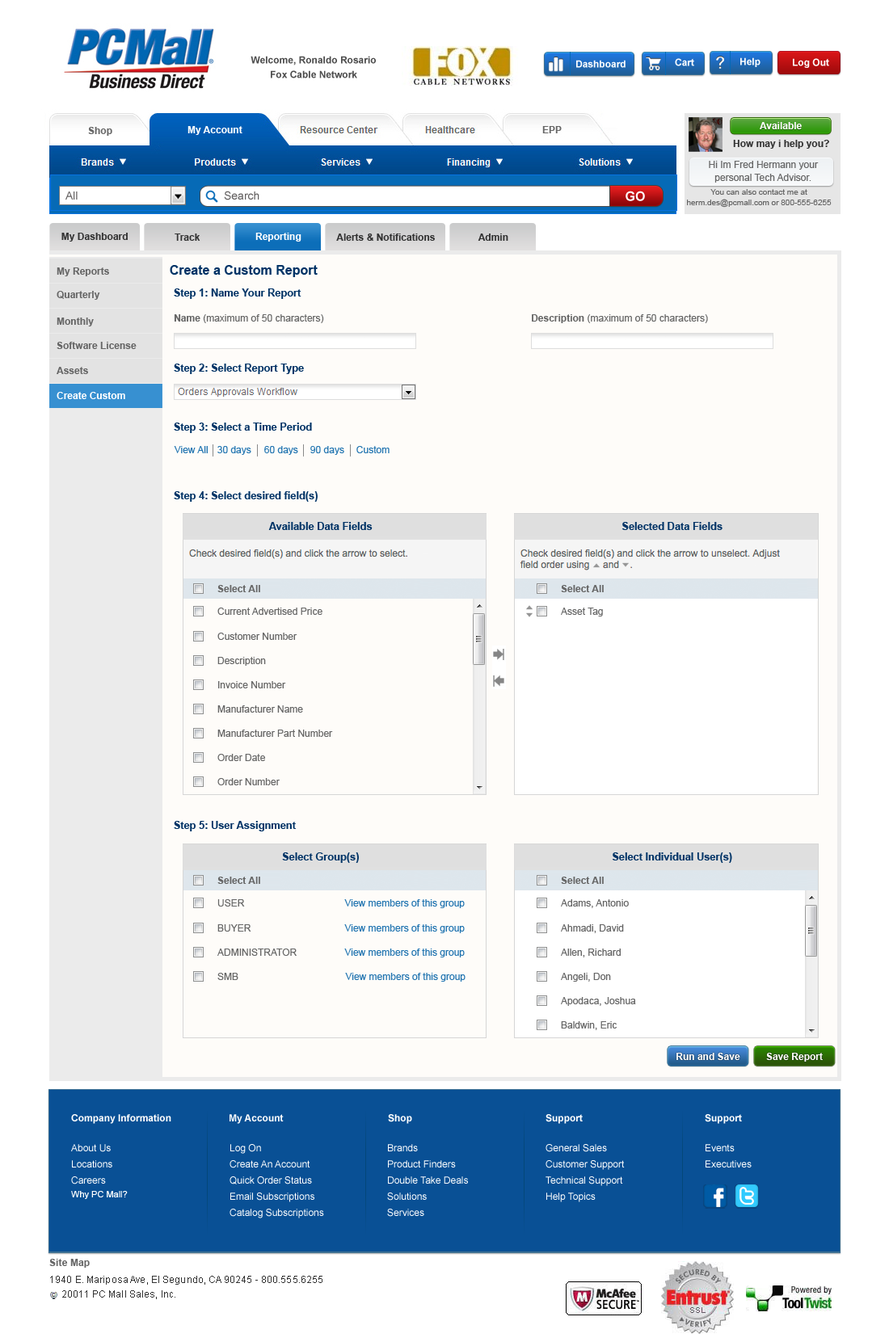
<style>
.page{position:relative;width:889px;height:1342px;background:#ffffff}
.page>*{position:absolute;margin:0}
.t1{font:9.7px/14.5px "Arial-BoldMT";color:#4e4e4e}
.t2{font:9.7px "Arial-BoldMT";color:#feffff}
.t3{font:9.7px "Arial-BoldMT";color:#fffefe}
.t4{font:9.7px "Arial-BoldMT";color:#333333}
.t5{font:9.7px/12.9px "ArialMT";color:#666666}
.t6{font:11.3px "ArialMT";color:#625f5f}
.t7{font:12.9px "Arial-BoldMT";color:#ffffff}
.t8{font:8.1px/10.5px "ArialMT";color:#666666}
.t9{font:9.7px "Arial-BoldMT";color:#ffffff}
.t10{font:12.9px "Arial-BoldMT";color:#003366}
.t11{font:10.4px "Arial-BoldMT";color:#003366}
.t12{font:9.7px "ArialMT";color:#666666}
.t13{font:9.7px "Arial-BoldMT";color:#666666}
.t14{font:9.7px "ArialMT";color:#2275b1}
.t15{font:9.7px/16.2px "ArialMT";color:#ffffff}
.t16{font:8.9px "ArialMT";color:#ffffff}
.t17{font:9.7px "Arial-BoldMT";letter-spacing:0.01em;color:#666666}
.t18{font:9.7px "ArialMT";letter-spacing:0.01em;color:#333333}
</style>
<div class="page">
<p class="t1" style="left:250px;top:56px;width:126px;height:22px;text-align:center">Welcome, Ronaldo Rosario <br>Fox Cable Network</p>
<p class="t2" style="left:576px;top:60px;width:49px;height:8px">Dashboard</p>
<p class="t2" style="left:675px;top:58px;width:19px;height:8px">Cart</p>
<p class="t2" style="left:740px;top:57px;width:20px;height:10px">Help</p>
<p class="t2" style="left:793px;top:58px;width:36px;height:10px">Log Out</p>
<p class="t3" style="left:759px;top:122px;width:42px;height:7px">Available</p>
<p class="t4" style="left:733px;top:140px;width:96px;height:9px">How may i help you?</p>
<p class="t5" style="left:708px;top:161px;width:110px;height:22px;text-align:center">Hi Im Fred Hermann your personal Tech Advisor.</p>
<p class="t6" style="left:65px;top:191px;width:13px;height:9px">All</p>
<p class="t6" style="left:224px;top:191px;width:35px;height:9px">Search</p>
<p class="t7" style="left:625px;top:191px;width:20px;height:10px">GOv</p>
<p class="t8" style="left:687px;top:189px;width:144px;height:19px;text-align:center">You can also contact me at herm.des@pcmall.com or 800-555-6255</p>
<p class="t4" style="left:61px;top:233px;width:67px;height:9px">My Dashboard</p>
<p class="t4" style="left:174px;top:233px;width:26px;height:8px">Track</p>
<p class="t9" style="left:255px;top:233px;width:46px;height:9px">Reporting</p>
<p class="t4" style="left:336px;top:233px;width:99px;height:8px">Alerts &amp; Notifications</p>
<p class="t4" style="left:477px;top:233px;width:31px;height:8px">Admin</p>
<p class="t10" style="left:170px;top:265px;width:147px;height:12px">Create a Custom Report</p>
<p class="t11" style="left:174px;top:288px;width:127px;height:11px">Step 1: Name Your Report</p>
<p class="t12" style="left:174px;top:314px;width:150px;height:9px"><span class="t13">Name</span> (maximum of 50 characters)</p>
<p class="t12" style="left:532px;top:314px;width:176px;height:9px"><span class="t13">Description </span>(maximum of 50 characters)</p>
<p class="t11" style="left:174px;top:364px;width:130px;height:10px">Step 2: Select Report Type</p>
<p class="t11" style="left:174px;top:423px;width:138px;height:10px">Step 3: Select a Time Period</p>
<p class="t14" style="left:174px;top:446px;width:34px;height:7px">View All</p>
<p class="t14" style="left:217px;top:446px;width:34px;height:9px">30 days</p>
<p class="t14" style="left:264px;top:446px;width:34px;height:9px">60 days</p>
<p class="t14" style="left:310px;top:446px;width:34px;height:9px">90 days</p>
<p class="t14" style="left:356px;top:446px;width:33px;height:7px">Custom</p>
<p class="t11" style="left:174px;top:491px;width:143px;height:11px">Step 4: Select desired field(s)</p>
<p class="t11" style="left:174px;top:821px;width:122px;height:10px">Step 5: User Assignment</p>
<p class="t9" style="left:676px;top:1053px;width:64px;height:7px">Run and Save</p>
<p class="t9" style="left:766px;top:1053px;width:56px;height:9px">Save Report</p>
<p class="t9" style="left:71px;top:1114px;width:100px;height:10px">Company Information</p>
<p class="t9" style="left:229px;top:1114px;width:55px;height:10px">My Account</p>
<p class="t9" style="left:388px;top:1114px;width:24px;height:10px">Shop</p>
<p class="t9" style="left:545px;top:1114px;width:37px;height:10px">Support</p>
<p class="t9" style="left:704px;top:1114px;width:38px;height:10px">Support</p>
<p class="t15" style="left:71px;top:1144px;width:41px;height:40px">About Us<br>Locations<br>Careers</p>
<p class="t15" style="left:229px;top:1144px;width:95px;height:74px">Log On<br>Create An Account<br>Quick Order Status<br>Email Subscriptions<br>Catalog Subscriptions</p>
<p class="t15" style="left:387px;top:1144px;width:81px;height:73px">Brands<br>Product Finders<br>Double Take Deals<br>Solutions<br>Services</p>
<p class="t15" style="left:545px;top:1144px;width:79px;height:58px">General Sales<br>Customer Support<br>Technical Support<br>Help Topics</p>
<p class="t15" style="left:705px;top:1144px;width:46px;height:23px">Events<br>Executives</p>
<p class="t16" style="left:71px;top:1191px;width:57px;height:8px">Why PC Mall?</p>
<p class="t17" style="left:49px;top:1259px;width:41px;height:9px">Site Map</p>
<p class="t18" style="left:50px;top:1276px;width:272px;height:8px">1940 E. Mariposa Ave, El Segundo, CA 90245 - 800.555.6255</p>
<p class="t18" style="left:62px;top:1290px;width:113px;height:9px">20011 PC Mall Sales, Inc.</p>
</div>
